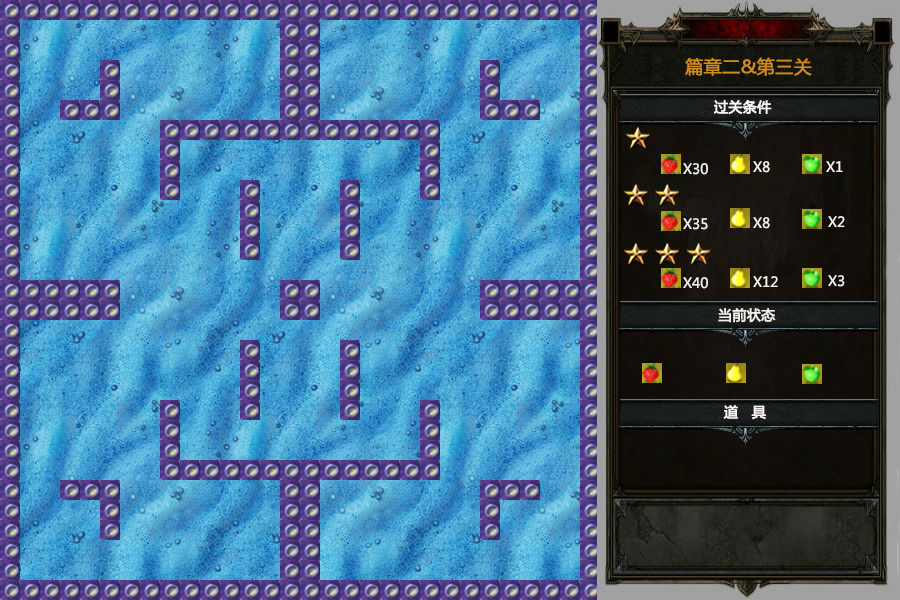
<style>
.page{position:relative;width:900px;height:600px}
.page>*{position:absolute;margin:0}
.t1{font:18px "MicrosoftYaHei";color:#cf8b20;font-weight:bold}
.t2{font:14px "MicrosoftYaHei";color:#f9f3f3;font-weight:bold}
.t3{font:14px "MicrosoftYaHei";color:#f1f0e9}
.t4{font:14px "MicrosoftYaHei";color:#f1f0e9;font-weight:bold}
</style>
<div class="page">
<p class="t1" style="left:685px;top:57px;width:127px;height:19px">篇章二&amp;第三关</p>
<p class="t2" style="left:714px;top:100px;width:58px;height:15px">过关条件</p>
<p class="t3" style="left:753px;top:161px;width:17px;height:12px">X8</p>
<p class="t3" style="left:826px;top:161px;width:17px;height:11px">X1</p>
<p class="t3" style="left:683px;top:163px;width:25px;height:12px">X30</p>
<p class="t3" style="left:683px;top:218px;width:25px;height:12px">X35</p>
<p class="t3" style="left:753px;top:217px;width:17px;height:12px">X8</p>
<p class="t3" style="left:828px;top:216px;width:17px;height:11px">X2</p>
<p class="t3" style="left:683px;top:277px;width:25px;height:12px">X40</p>
<p class="t3" style="left:753px;top:276px;width:25px;height:11px">X12</p>
<p class="t3" style="left:828px;top:275px;width:17px;height:12px">X3</p>
<p class="t4" style="left:718px;top:308px;width:58px;height:15px">当前状态</p>
<p class="t2" style="left:723px;top:405px;width:43px;height:15px">道   具</p>
</div>
